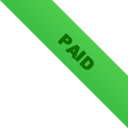
<style>
.page{position:relative;width:128px;height:128px;background:#ffffff}
.page>*{position:absolute;margin:0}
.t1{font:16.7px "Arial-Black";letter-spacing:-0.05em;color:#0e6f04;text-transform:uppercase;font-weight:bold}
</style>
<div class="page">
<p class="t1" style="left:57px;top:33px;width:37px;height:37px;rotate:45deg">paid</p>
</div>
